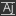
<style>
.page{position:relative;width:16px;height:16px;background:#333333}
.page>*{position:absolute;margin:0}
.t1{font:12px "ArialMT";color:#e1e1e1}
</style>
<div class="page">
<p class="t1" style="left:3px;top:2px;width:10px;height:12px">Aj</p>
</div>
